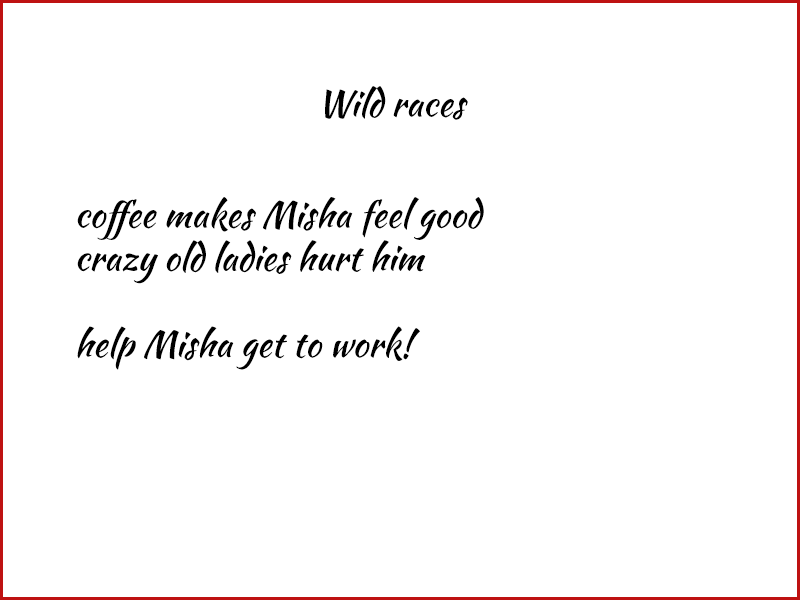
<style>
.page{position:relative;width:800px;height:600px;background:#ffffff}
.page>*{position:absolute;margin:0}
.t1{font:36px "KaushanScript-Regular";color:#000000}
</style>
<div class="page">
<p class="t1" style="left:325px;top:86px;width:143px;height:34px">Wild races</p>
<p class="t1" style="left:77px;top:197px;width:407px;height:173px">coffee makes Misha feel good<br>crazy old ladies hurt him<br><br>help Misha get to work!</p>
</div>
